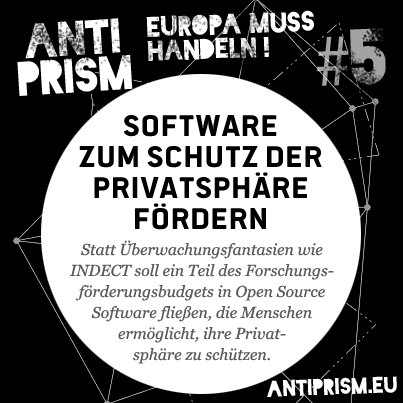
<style>
.page{position:relative;width:403px;height:403px;background:#000000}
.page>*{position:absolute;margin:0}
.t1{font:26.8px/23.9px "Blackout-Midnight";color:#ffffff}
.t2{font:45.7px/37.2px "Blackout-Midnight";color:#ffffff}
.t3{font:74.8px "MyriadPro-Regular"}
.t4{font:74.8px "Blackout-Midnight"}
.t5{font:33px/31px "PoliticsHead-Bold";color:#000000}
.t6{font:15.8px/21px "Georgia-Italic";color:#5c5c5c}
.t7{font:21.6px "Blackout-Midnight";color:#ffffff}
</style>
<div class="page">
<p class="t1" style="left:146px;top:10px;width:168px;height:51px;rotate:-2deg">EUROPA MUSS<br>HANDELN !</p>
<p class="t2" style="left:17px;top:18px;width:116px;height:78px;text-align:center;rotate:-4deg">ANTI<br>PRISM</p>
<p class="t3" style="left:317px;top:28px;width:69px;height:58px;rotate:-2deg">#<span class="t4">5</span></p>
<p class="t5" style="left:79px;top:115px;width:243px;height:115px;text-align:center">Software<br>zum Schutz der Privatsphäre fördern</p>
<p class="t6" style="left:69px;top:240px;width:265px;height:124px;text-align:center">Statt Überwachungsfantasien wie INDECT soll ein Teil des Forschungs-<br>förderungsbudgets in Open Source<br>Software fließen, die Menschen<br>ermöglicht, ihre Privat-<br>sphäre zu schützen.</p>
<p class="t7" style="left:267px;top:376px;width:130px;height:21px;rotate:-2deg">antiprism.eu</p>
</div>
